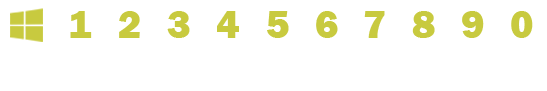
<style>
.page{position:relative;width:547px;height:91px;background:#ffffff}
.page>*{position:absolute;margin:0}
.t1{font:40px "FranklinGothic-Heavy";letter-spacing:0.04em;color:#c8ca3f}
</style>
<div class="page">
<p class="t1" style="left:70px;top:11px;width:22px;height:27px">1</p>
<p class="t1" style="left:119px;top:11px;width:21px;height:27px">2</p>
<p class="t1" style="left:167px;top:11px;width:23px;height:27px">3</p>
<p class="t1" style="left:217px;top:11px;width:22px;height:27px">4</p>
<p class="t1" style="left:267px;top:11px;width:22px;height:27px">5</p>
<p class="t1" style="left:316px;top:11px;width:22px;height:27px">6</p>
<p class="t1" style="left:364px;top:11px;width:21px;height:27px">7</p>
<p class="t1" style="left:412px;top:11px;width:23px;height:27px">8</p>
<p class="t1" style="left:462px;top:11px;width:22px;height:27px">9</p>
<p class="t1" style="left:511px;top:11px;width:22px;height:27px">0</p>
</div>
